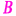
<style>
.page{position:relative;width:16px;height:16px;background:#ffffff}
.page>*{position:absolute;margin:0}
.t1{font:18.7px "FangSong_GB2312";color:#fe03d8;text-transform:uppercase;font-weight:bold;font-style:italic}
</style>
<div class="page">
<p class="t1" style="left:3px;top:0px;width:10px;height:14px">B</p>
</div>
